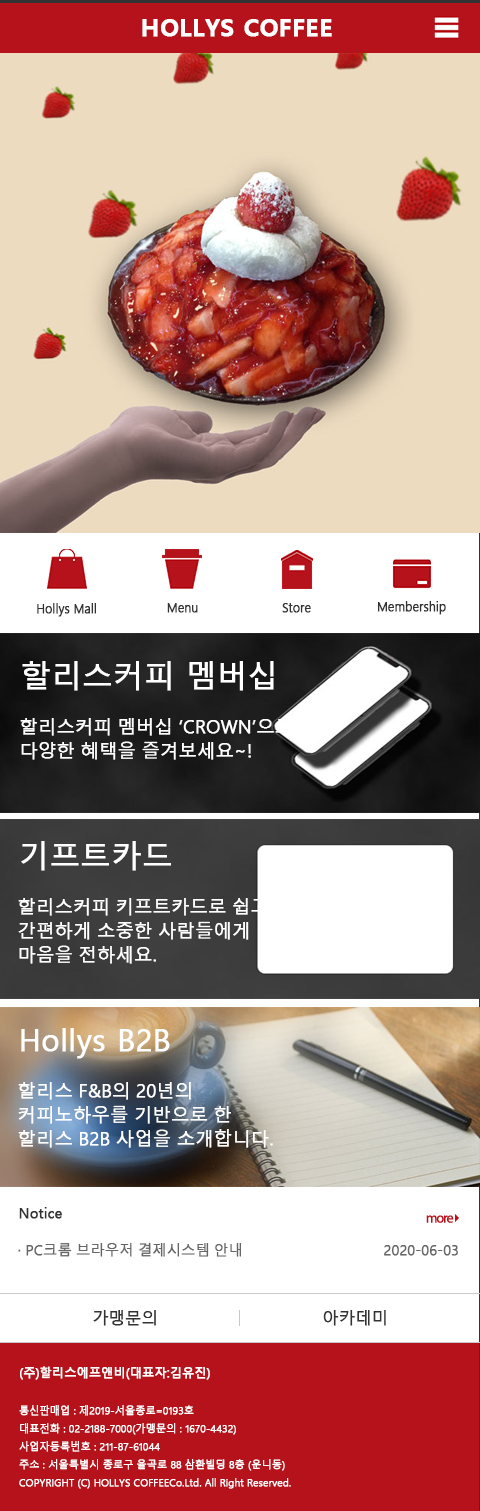
<style>
.page{position:relative;width:480px;height:1511px;background:#ffffff}
.page>*{position:absolute;margin:0}
.t1{font:24px "MalgunGothicBold";color:#ffffff;font-weight:bold}
.t2{font:12px "MalgunGothic-Semilight";color:#333333;font-weight:bold}
.t3{font:30px "MalgunGothic";color:#ffffff;font-weight:bold}
.t4{font:18px/24px "MalgunGothic-Semilight";color:#ffffff;font-weight:bold}
.t5{font:14px "MalgunGothic";color:#333333;font-weight:bold}
.t6{font:14px "MalgunGothic-Semilight";color:#666666;font-weight:bold}
.t7{font:16px "MalgunGothic-Semilight";color:#333333;font-weight:bold}
.t8{font:12px "MalgunGothic";color:#ffffff;font-weight:bold}
.t9{font:10px/18px "MalgunGothic-Semilight";color:#ffffff;font-weight:bold}
</style>
<div class="page">
<p class="t1" style="left:142px;top:19px;width:190px;height:18px">HOLLYS COFFEE</p>
<p class="t2" style="left:37px;top:603px;width:59px;height:14px">Hollys Mall</p>
<p class="t2" style="left:167px;top:603px;width:31px;height:10px">Menu</p>
<p class="t2" style="left:282px;top:603px;width:29px;height:10px">Store</p>
<p class="t2" style="left:378px;top:601px;width:68px;height:14px">Membership</p>
<p class="t3" style="left:22px;top:661px;width:252px;height:30px">할리스커피 멤버십</p>
<p class="t4" style="left:20px;top:718px;width:273px;height:42px">할리스커피 멤버십 ‘CROWN’으로<br>다양한 혜택을 즐겨보세요~!</p>
<p class="t3" style="left:21px;top:841px;width:150px;height:30px">기프트카드</p>
<p class="t4" style="left:18px;top:898px;width:250px;height:66px">할리스커피 키프트카드로 쉽고<br>간편하게 소중한 사람들에게 <br>마음을 전하세요.</p>
<p class="t3" style="left:21px;top:1028px;width:149px;height:31px">Hollys B2B</p>
<p class="t4" style="left:18px;top:1082px;width:255px;height:66px">할리스 F&amp;B의 20년의<br>커피노하우를 기반으로 한 <br>할리스 B2B 사업을 소개합니다.</p>
<p class="t5" style="left:19px;top:1207px;width:43px;height:12px">Notice</p>
<p class="t6" style="left:18px;top:1242px;width:223px;height:15px">· PC크롬 브라우저 결제시스템 안내</p>
<p class="t6" style="left:384px;top:1245px;width:74px;height:11px">2020-06-03</p>
<p class="t7" style="left:93px;top:1310px;width:63px;height:16px">가맹문의</p>
<p class="t7" style="left:323px;top:1310px;width:63px;height:16px">아카데미</p>
<p class="t8" style="left:20px;top:1366px;width:190px;height:14px">(주)할리스에프앤비(대표자:김유진)</p>
<p class="t9" style="left:19px;top:1405px;width:272px;height:84px">통신판매업 : 제2019-서울종로=0193호<br>대표전화 : 02-2188-7000(가맹문의 : 1670-4432)<br>사업자등록번호 : 211-87-61044<br>주소 : 서울특별시 종로구 율곡로 88 삼환빌딩 8층 (운니동)<br>COPYRIGHT (C) HOLLYS COFFEECo.Ltd. All Right Reserved.</p>
</div>
